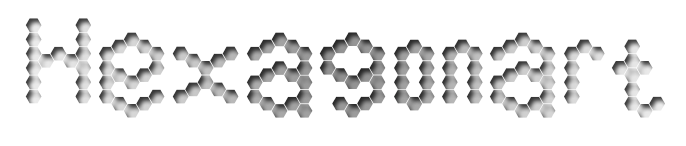
<style>
.page{position:relative;width:686px;height:146px;background:#ffffff}
.page>*{position:absolute;margin:0}
.t1{font:114px "Hexamatter-Regular"}
</style>
<div class="page">
<p class="t1" style="left:25px;top:18px;width:640px;height:100px">Hexagonart</p>
</div>
